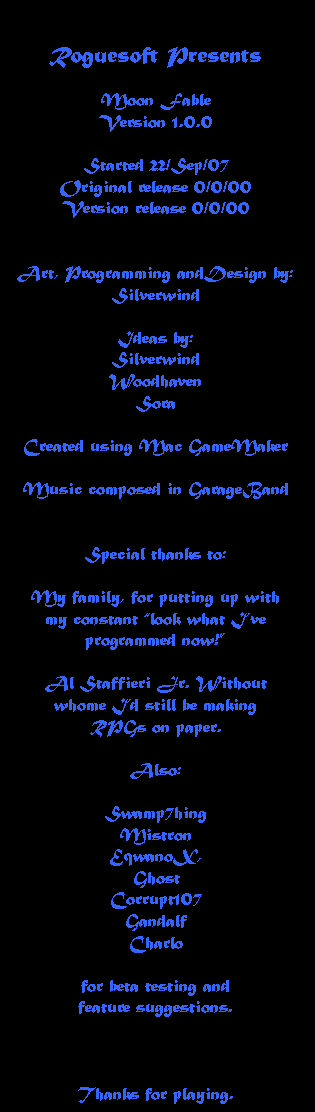
<style>
.page{position:relative;width:315px;height:1112px;background:#000000}
.page>*{position:absolute;margin:0}
.t1{font:18px "MaturaMTScriptCapitals";color:#3366ff}
.t2{font:24px "MaturaMTScriptCapitals";color:#3366ff}
</style>
<div class="page">
<p class="t1" style="left:17px;top:47px;width:276px;height:1057px;text-align:center"><span class="t2">Roguesoft Presents<br></span><br>Moon Fable<br>Version 1.0.0<br><br>Started 22/Sep/07<br>Original release 0/0/00<br>Version release 0/0/00<br><br><br>Art, Programming andDesign by:<br>Silverwind<br><br>Ideas by:<br>Silverwind<br>Woodhaven<br>Sora<br><br>Created using Mac GameMaker<br><br>Music composed in GarageBand<br><br><br>Special thanks to:<br><br>My family, for putting up with<br>my constant “look what I’ve<br>programmed now!”<br><br>Al Staffieri Jr. Without<br>whome I’d still be making<br>RPGs on paper.<br><br>Also:<br><br>Swamp7hing<br>Mistron<br>EqwanoX,<br>Ghost<br>Corrupt107<br>Gandalf<br>Charlo<br><br>for beta testing and<br>feature suggestions.<br><br><br><br>Thanks for playing.</p>
</div>
